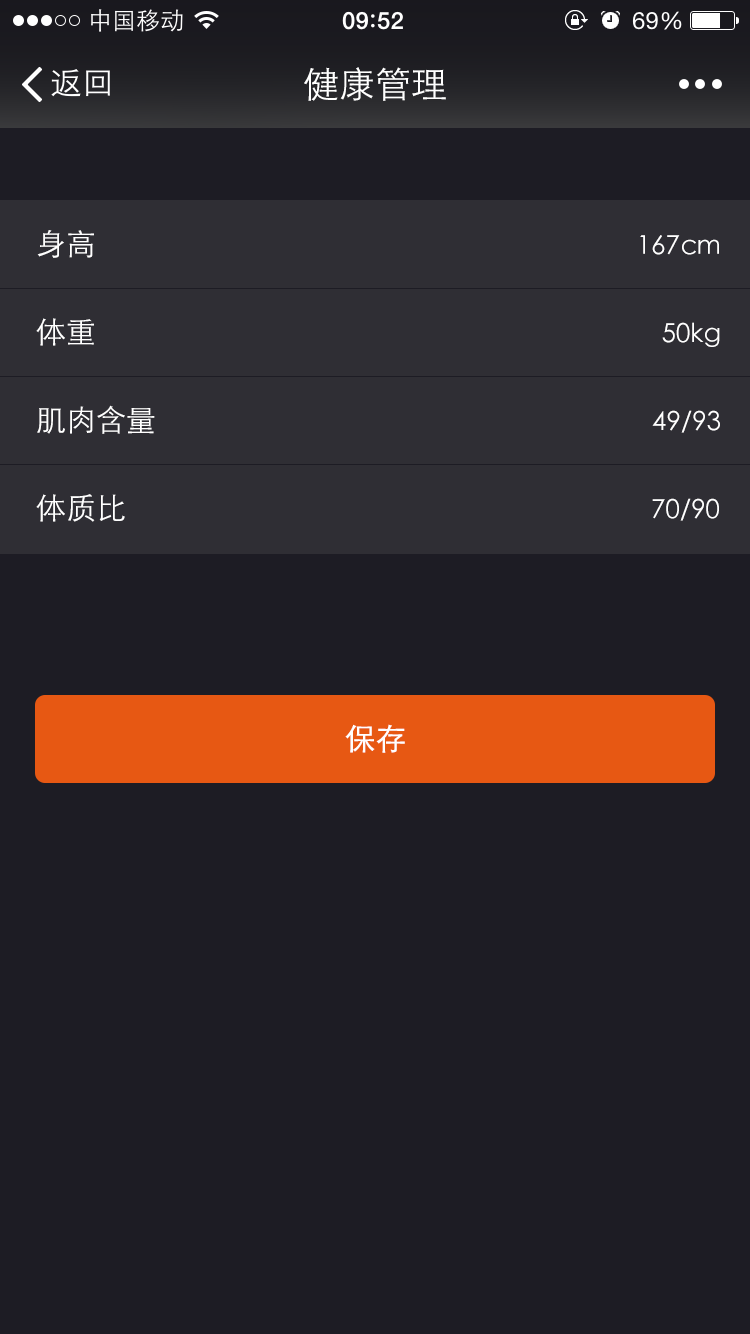
<style>
.page{position:relative;width:750px;height:1334px;background:#1d1c24}
.page>*{position:absolute;margin:0}
.t1{font:36px "STXihei";color:#ffffff}
.t2{font:30px "STXihei";color:#ffffff}
.t3{font:26px "STXihei";color:#ffffff}
.t4{font:30px "STXihei";color:#ffffff;font-weight:bold}
</style>
<div class="page">
<p class="t1" style="left:304px;top:67px;width:142px;height:34px">健康管理</p>
<p class="t2" style="left:37px;top:230px;width:57px;height:28px">身高</p>
<p class="t3" style="left:640px;top:235px;width:79px;height:20px">167cm</p>
<p class="t2" style="left:36px;top:318px;width:58px;height:28px">体重</p>
<p class="t3" style="left:662px;top:322px;width:58px;height:25px">50kg</p>
<p class="t2" style="left:37px;top:405px;width:118px;height:29px">肌肉含量</p>
<p class="t3" style="left:652px;top:410px;width:68px;height:23px">49/93</p>
<p class="t2" style="left:36px;top:494px;width:89px;height:28px">体质比</p>
<p class="t3" style="left:652px;top:498px;width:67px;height:23px">70/90</p>
<p class="t4" style="left:345px;top:724px;width:60px;height:29px">保存</p>
</div>
